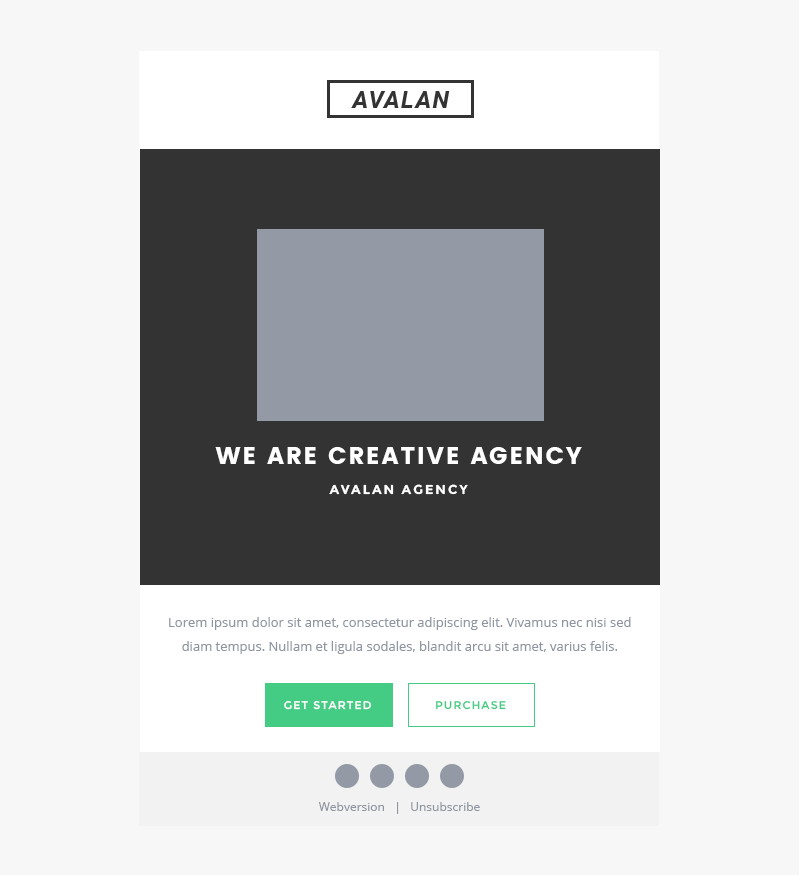
<style>
.page{position:relative;width:800px;height:875px;background:#f7f7f7}
.page>*{position:absolute;margin:0}
.t1{font:24px "Poppins";letter-spacing:0.075em;color:#ffffff}
.t2{font:13px "Montserrat-Bold";letter-spacing:0.15em;color:#ffffff}
.t3{font:13px/24px "OpenSans";color:#8f96a1}
.t4{font:11px "Montserrat-Regular";letter-spacing:0.1em;color:#ffffff}
.t5{font:11px "Montserrat-Regular";letter-spacing:0.1em;color:#44cc84}
.t6{font:12px "OpenSans";color:#8f96a1}
</style>
<div class="page">
<p class="t1" style="left:215px;top:447px;width:367px;height:17px">WE ARE CREATIVE AGENCY</p>
<p class="t2" style="left:329px;top:484px;width:139px;height:11px">AVALAN AGENCY</p>
<p class="t3" style="left:169px;top:617px;width:462px;height:37px;text-align:center">Lorem ipsum dolor sit amet, consectetur adipiscing elit. Vivamus nec nisi sed diam tempus. Nullam et ligula sodales, blandit arcu sit amet, varius felis.</p>
<p class="t4" style="left:284px;top:701px;width:87px;height:9px">GET STARTED</p>
<p class="t5" style="left:436px;top:701px;width:70px;height:9px">PURCHASE</p>
<p class="t6" style="left:318px;top:802px;width:162px;height:12px">Webversion   |   Unsubscribe</p>
</div>
